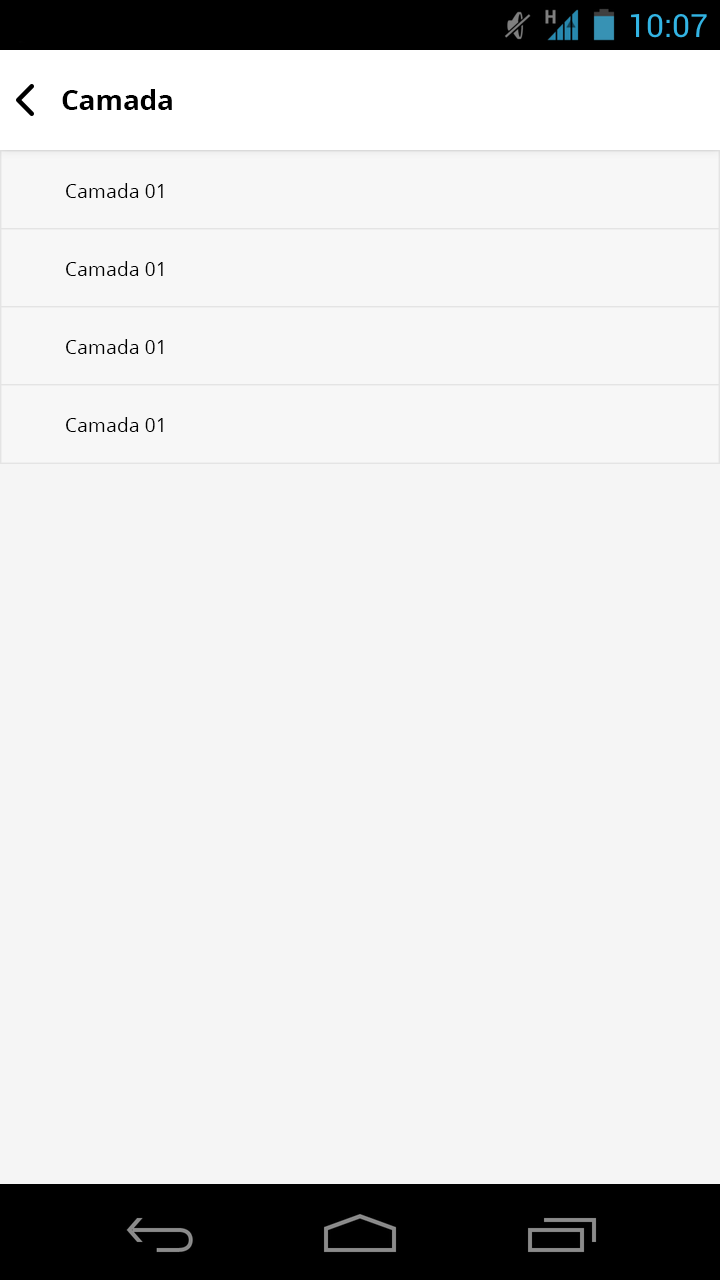
<style>
.page{position:relative;width:720px;height:1280px;background:#f5f5f5}
.page>*{position:absolute;margin:0}
.t1{font:27.8px "OpenSans-Bold";color:#000000}
.t2{font:19.4px "OpenSans";color:#000000}
</style>
<div class="page">
<p class="t1" style="left:62px;top:89px;width:110px;height:21px">Camada</p>
<p class="t2" style="left:66px;top:183px;width:97px;height:15px">Camada 01</p>
<p class="t2" style="left:66px;top:261px;width:97px;height:15px">Camada 01</p>
<p class="t2" style="left:66px;top:339px;width:97px;height:15px">Camada 01</p>
<p class="t2" style="left:66px;top:417px;width:97px;height:15px">Camada 01</p>
</div>
